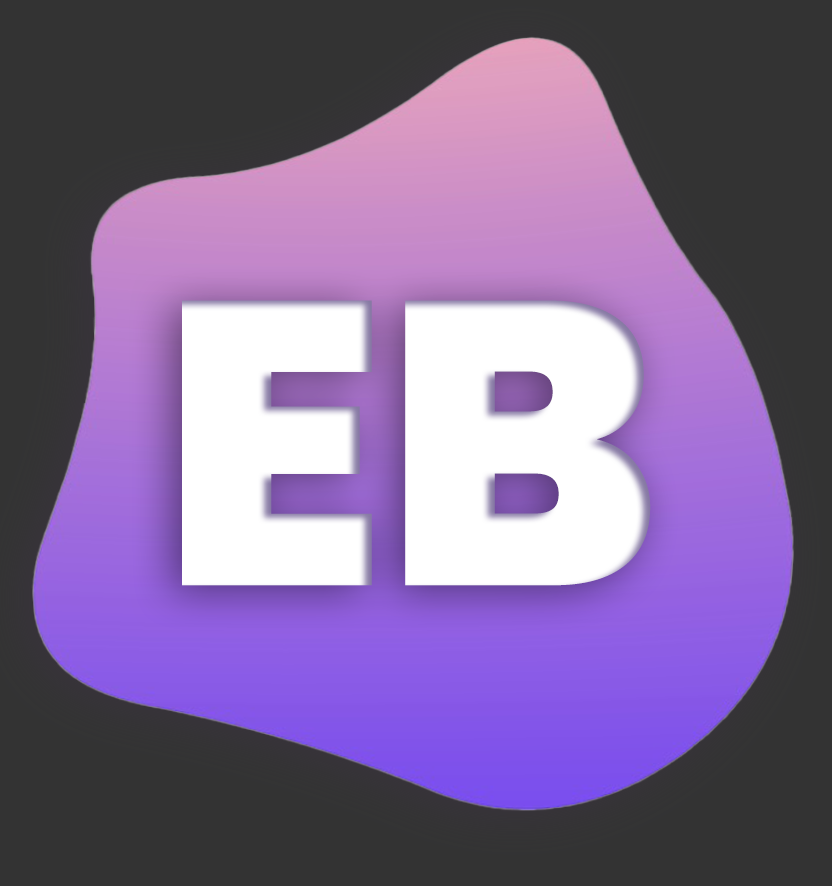
<style>
.page{position:relative;width:832px;height:886px;background:#333333}
.page>*{position:absolute;margin:0}
.t1{font:401.8px "Poppins-Black";color:#ffffff}
</style>
<div class="page">
<p class="t1" style="left:182px;top:300px;width:469px;height:286px">EB</p>
</div>
